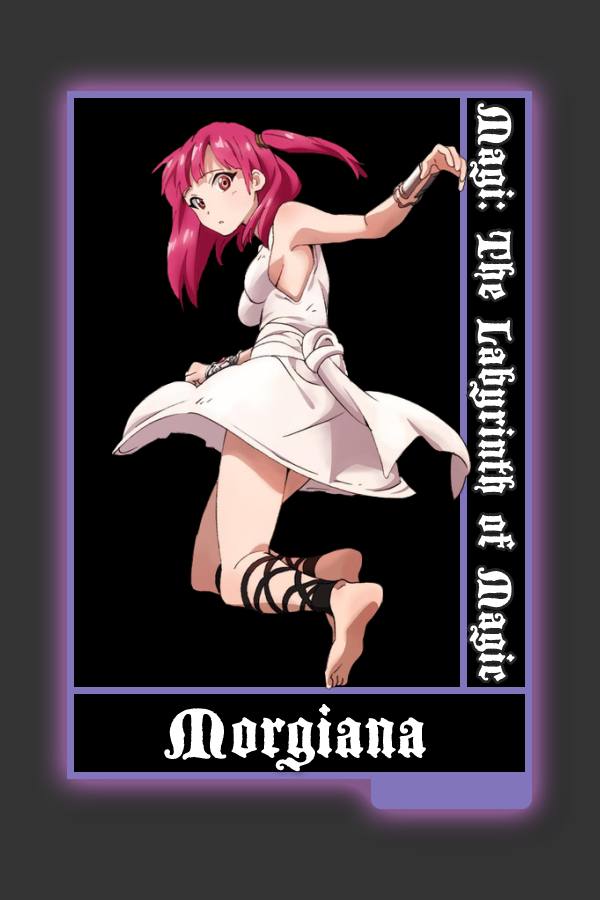
<style>
.page{position:relative;width:600px;height:900px;background:#000000}
.page>*{position:absolute;margin:0}
.t1{font:50px "BlackwoodCastle";color:#ffffff}
.t2{font:75px "BlackwoodCastle";color:#ffffff}
</style>
<div class="page">
<p class="t1" style="left:469px;top:103px;width:46px;height:579px;rotate:90deg">Magi: The Labyrinth of Magic</p>
<p class="t2" style="left:164px;top:703px;width:262px;height:69px">Morgiana</p>
</div>
